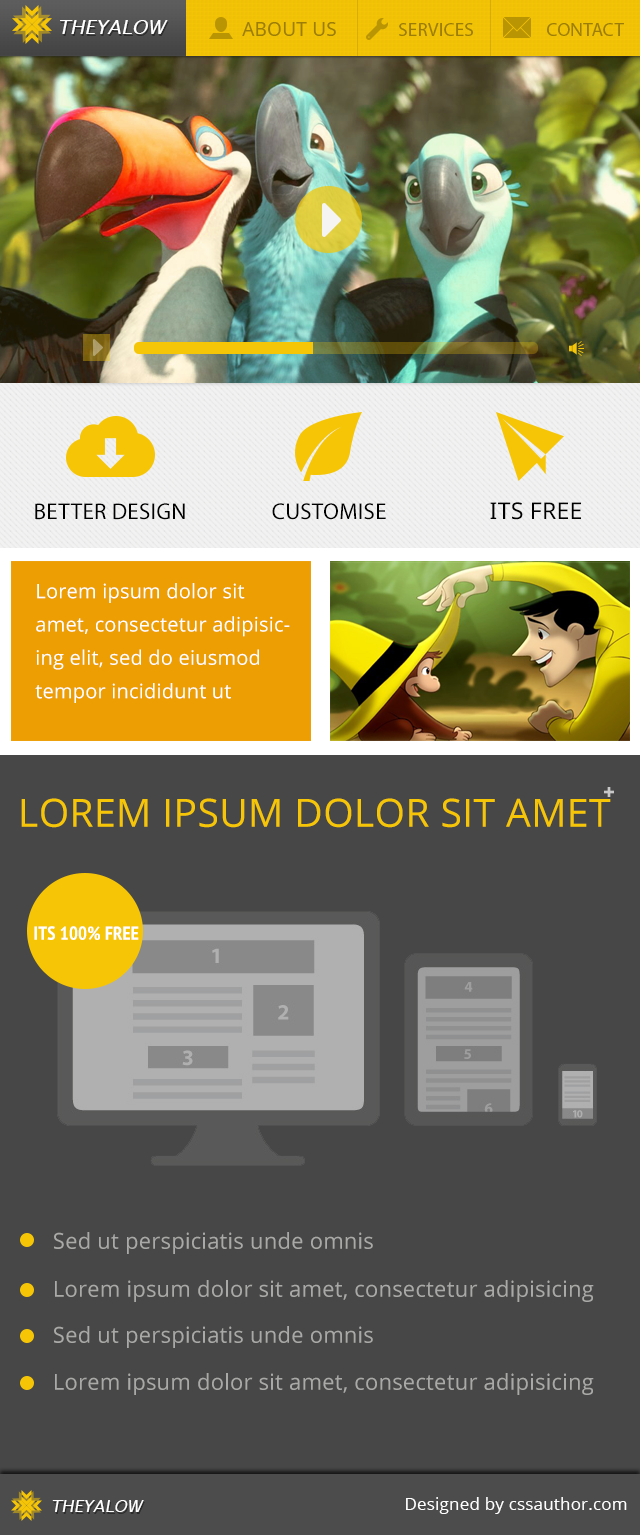
<style>
.page{position:relative;width:640px;height:1535px;background:#474747}
.page>*{position:absolute;margin:0}
.t1{font:19.3px "LucidaSans-Italic";letter-spacing:0.01em;color:#ffffff;text-transform:uppercase}
.t2{font:19px "NotoSans";letter-spacing:0.01em;color:#9b7d08;text-transform:uppercase}
.t3{font:23px "NotoSans";letter-spacing:0.01em;color:#000000;text-transform:uppercase}
.t4{font:20px/33.3px "OpenSans-Regular";letter-spacing:0.01em;color:#ffffff}
.t5{font:39px "OpenSans-Regular";letter-spacing:0.01em;color:#f5c506;text-transform:uppercase}
.t6{font:18.7px "PTSans-NarrowBold";letter-spacing:0.01em;color:#ffffff;text-transform:uppercase}
.t7{font:22px "OpenSans-Regular";letter-spacing:0.01em;color:#a9a9a7}
.t8{font:16.7px "LucidaSans-Italic";letter-spacing:0.01em;color:#ffffff;text-transform:uppercase}
.t9{font:17px "OpenSans-Regular";letter-spacing:0.01em;color:#ffffff}
</style>
<div class="page">
<p class="t1" style="left:60px;top:20px;width:108px;height:14px">TheYalow</p>
<p class="t2" style="left:242px;top:22px;width:94px;height:14px">About Us</p>
<p class="t2" style="left:399px;top:23px;width:74px;height:13px">Services</p>
<p class="t2" style="left:547px;top:23px;width:77px;height:13px">Contact</p>
<p class="t3" style="left:35px;top:503px;width:150px;height:17px">better design</p>
<p class="t3" style="left:272px;top:503px;width:114px;height:17px">Customise</p>
<p class="t3" style="left:490px;top:502px;width:91px;height:18px">Its Free</p>
<p class="t4" style="left:35px;top:583px;width:255px;height:120px">Lorem ipsum dolor sit amet, consectetur adipisicing elit, sed do eiusmod tempor incididunt ut</p>
<p class="t5" style="left:21px;top:798px;width:590px;height:30px">Lorem ipsum dolor sit amet</p>
<p class="t6" style="left:34px;top:926px;width:105px;height:14px">Its 100% Free</p>
<p class="t7" style="left:54px;top:1232px;width:319px;height:22px">Sed ut perspiciatis unde omnis</p>
<p class="t7" style="left:55px;top:1280px;width:539px;height:22px">Lorem ipsum dolor sit amet, consectetur adipisicing</p>
<p class="t7" style="left:54px;top:1326px;width:319px;height:22px">Sed ut perspiciatis unde omnis</p>
<p class="t7" style="left:55px;top:1373px;width:539px;height:22px">Lorem ipsum dolor sit amet, consectetur adipisicing</p>
<p class="t8" style="left:52px;top:1500px;width:92px;height:12px">TheYalow</p>
<p class="t9" style="left:406px;top:1497px;width:221px;height:17px">Designed by cssauthor.com</p>
</div>
